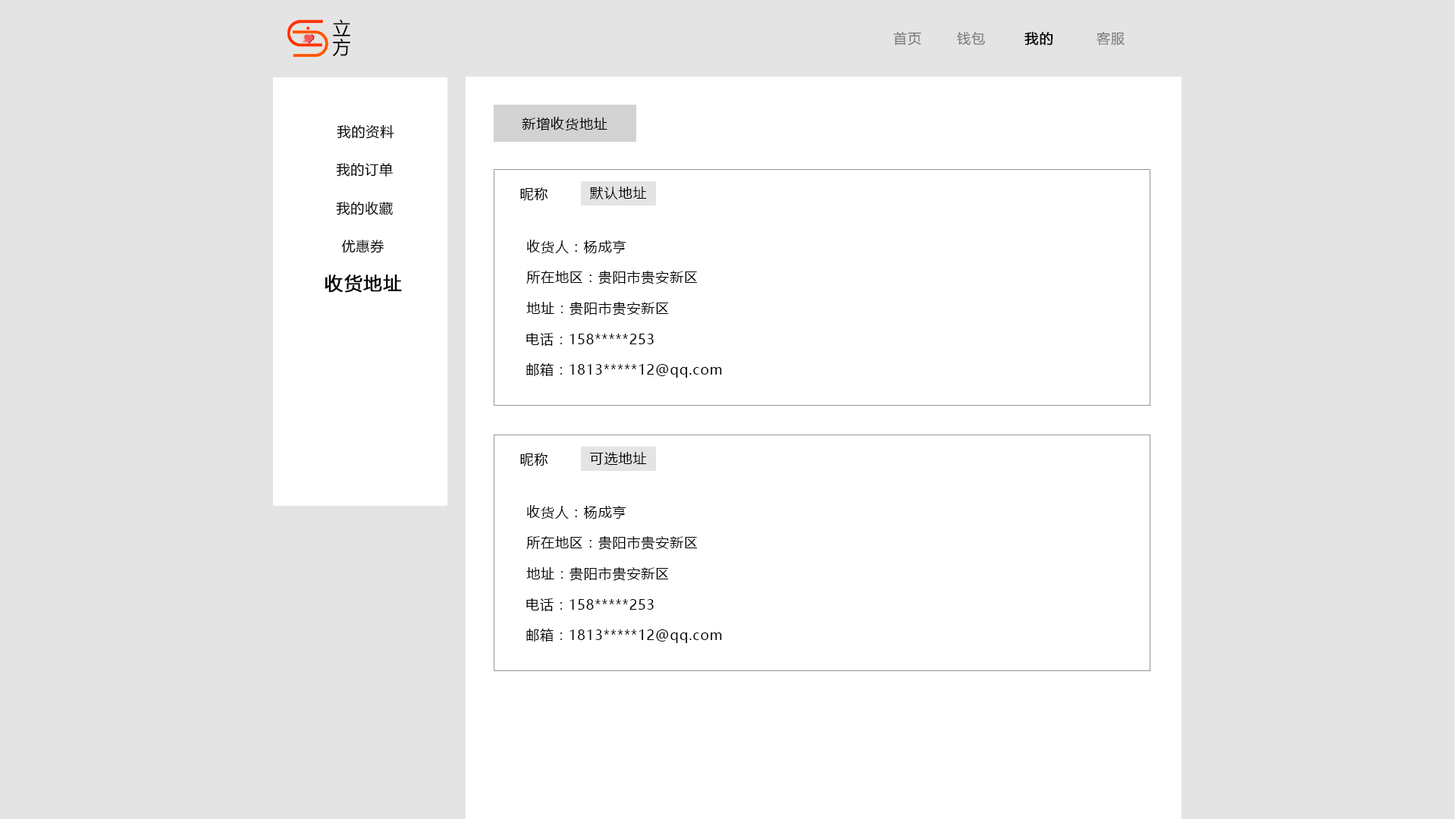
<style>
.page{position:relative;width:1456px;height:819px;background:#ffffff}
.page>*{position:absolute;margin:0}
.t1{font:18.2px/13.6px "MicrosoftYaHeiUI";letter-spacing:0.05em;color:#000000}
.t2{font:13.6px "MicrosoftYaHeiUI";letter-spacing:0.05em;color:#797979}
.t3{font:13.6px "MicrosoftYaHeiUI";letter-spacing:0.05em;color:#000000;font-weight:bold}
.t4{font:13.6px "MicrosoftYaHeiUI";letter-spacing:0.05em;color:#000000}
.t5{font:13.7px "MicrosoftYaHeiUI";letter-spacing:0.05em;color:#000000}
.t6{font:18.2px "MicrosoftYaHeiUI";letter-spacing:0.05em;color:#000000;font-weight:bold}
</style>
<div class="page">
<p class="t1" style="left:332px;top:19px;width:18px;height:38px">立方</p>
<p class="t2" style="left:893px;top:32px;width:28px;height:13px">首页</p>
<p class="t2" style="left:957px;top:32px;width:28px;height:13px">钱包</p>
<p class="t3" style="left:1024px;top:32px;width:29px;height:13px">我的</p>
<p class="t2" style="left:1097px;top:32px;width:28px;height:13px">客服</p>
<p class="t4" style="left:337px;top:124px;width:57px;height:15px">我的资料</p>
<p class="t5" style="left:522px;top:117px;width:85px;height:13px">新增收货地址</p>
<p class="t4" style="left:336px;top:163px;width:57px;height:14px">我的订单</p>
<p class="t5" style="left:520px;top:187px;width:28px;height:14px">昵称</p>
<p class="t5" style="left:590px;top:187px;width:57px;height:12px">默认地址</p>
<p class="t4" style="left:336px;top:201px;width:57px;height:14px">我的收藏</p>
<p class="t4" style="left:341px;top:240px;width:43px;height:13px">优惠券</p>
<p class="t5" style="left:527px;top:240px;width:99px;height:13px">收货人：杨成亨</p>
<p class="t5" style="left:526px;top:270px;width:172px;height:14px">所在地区：贵阳市贵安新区</p>
<p class="t6" style="left:325px;top:275px;width:77px;height:18px">收货地址</p>
<p class="t5" style="left:526px;top:301px;width:143px;height:14px">地址：贵阳市贵安新区</p>
<p class="t5" style="left:526px;top:333px;width:128px;height:13px">电话：158*****253</p>
<p class="t5" style="left:526px;top:363px;width:196px;height:15px">邮箱：1813*****12@qq.com</p>
<p class="t5" style="left:520px;top:453px;width:28px;height:13px">昵称</p>
<p class="t5" style="left:590px;top:452px;width:57px;height:13px">可选地址</p>
<p class="t5" style="left:527px;top:505px;width:99px;height:14px">收货人：杨成亨</p>
<p class="t5" style="left:526px;top:535px;width:172px;height:15px">所在地区：贵阳市贵安新区</p>
<p class="t5" style="left:526px;top:566px;width:143px;height:15px">地址：贵阳市贵安新区</p>
<p class="t5" style="left:526px;top:598px;width:128px;height:13px">电话：158*****253</p>
<p class="t5" style="left:526px;top:629px;width:196px;height:14px">邮箱：1813*****12@qq.com</p>
</div>
